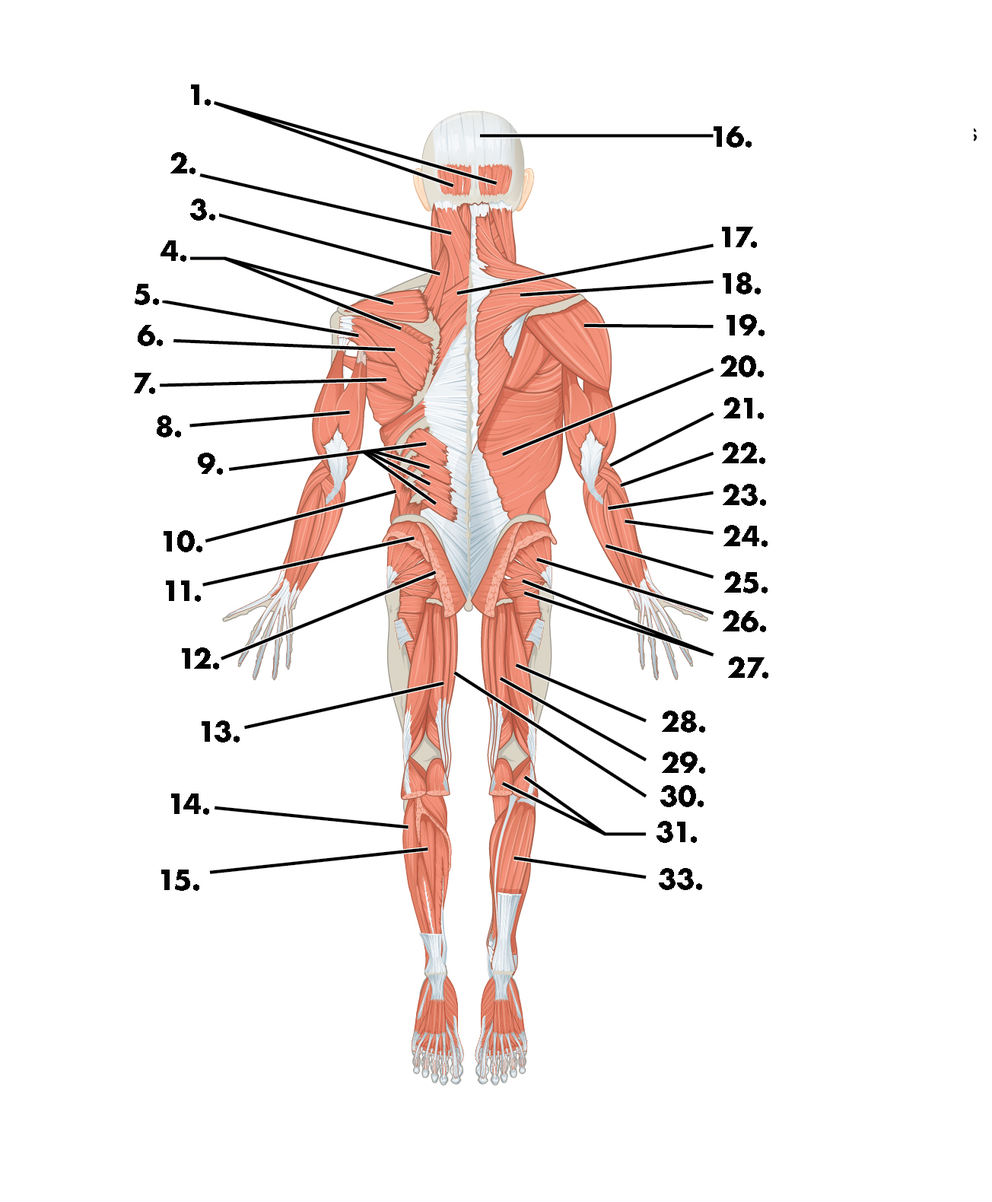
<style>
.page{position:relative;width:992px;height:1202px;background:#ffffff}
.page>*{position:absolute;margin:0}
.t1{font:47.5px "Futura-Bold";color:#020202}
</style>
<div class="page">
<p class="t1" style="left:191px;top:84px;width:20px;height:22px">1.</p>
<p class="t1" style="left:714px;top:126px;width:38px;height:22px">16.</p>
<p class="t1" style="left:170px;top:152px;width:26px;height:22px">2.</p>
<p class="t1" style="left:190px;top:199px;width:25px;height:22px">3.</p>
<p class="t1" style="left:722px;top:227px;width:35px;height:21px">17.</p>
<p class="t1" style="left:161px;top:240px;width:25px;height:22px">4.</p>
<p class="t1" style="left:723px;top:272px;width:38px;height:22px">18.</p>
<p class="t1" style="left:135px;top:284px;width:24px;height:21px">5.</p>
<p class="t1" style="left:727px;top:314px;width:38px;height:22px">19.</p>
<p class="t1" style="left:138px;top:325px;width:25px;height:21px">6.</p>
<p class="t1" style="left:720px;top:355px;width:44px;height:22px">20.</p>
<p class="t1" style="left:134px;top:373px;width:21px;height:21px">7.</p>
<p class="t1" style="left:723px;top:397px;width:41px;height:22px">21.</p>
<p class="t1" style="left:157px;top:415px;width:24px;height:22px">8.</p>
<p class="t1" style="left:722px;top:442px;width:43px;height:22px">22.</p>
<p class="t1" style="left:198px;top:453px;width:25px;height:22px">9.</p>
<p class="t1" style="left:723px;top:484px;width:43px;height:22px">23.</p>
<p class="t1" style="left:164px;top:530px;width:38px;height:22px">10.</p>
<p class="t1" style="left:723px;top:525px;width:45px;height:22px">24.</p>
<p class="t1" style="left:166px;top:580px;width:35px;height:22px">11.</p>
<p class="t1" style="left:724px;top:571px;width:44px;height:22px">25.</p>
<p class="t1" style="left:723px;top:610px;width:43px;height:22px">26.</p>
<p class="t1" style="left:182px;top:647px;width:37px;height:22px">12.</p>
<p class="t1" style="left:728px;top:657px;width:40px;height:22px">27.</p>
<p class="t1" style="left:662px;top:711px;width:43px;height:22px">28.</p>
<p class="t1" style="left:202px;top:720px;width:38px;height:23px">13.</p>
<p class="t1" style="left:662px;top:752px;width:43px;height:22px">29.</p>
<p class="t1" style="left:660px;top:785px;width:44px;height:22px">30.</p>
<p class="t1" style="left:171px;top:793px;width:38px;height:22px">14.</p>
<p class="t1" style="left:657px;top:821px;width:40px;height:22px">31.</p>
<p class="t1" style="left:161px;top:870px;width:38px;height:21px">15.</p>
<p class="t1" style="left:659px;top:868px;width:43px;height:22px">33.</p>
</div>
